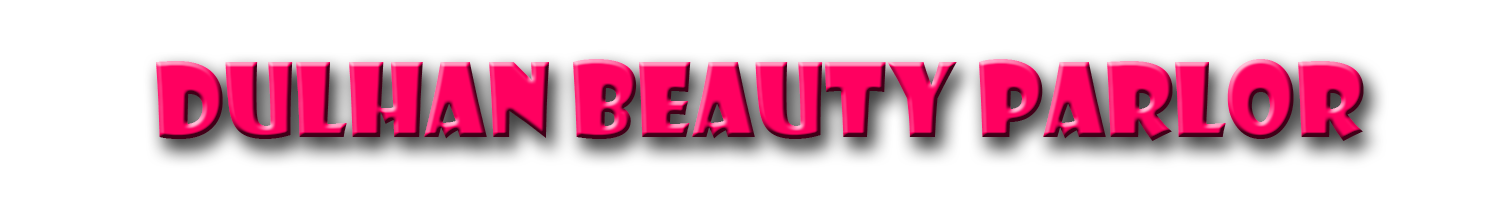
<style>
.page{position:relative;width:1500px;height:200px;background:#ffffff}
.page>*{position:absolute;margin:0}
.t1{font:100px "ShowcardGothic-Reg";color:#ff0060}
</style>
<div class="page">
<p class="t1" style="left:156px;top:59px;width:1208px;height:82px">Dulhan Beauty Parlor</p>
</div>
